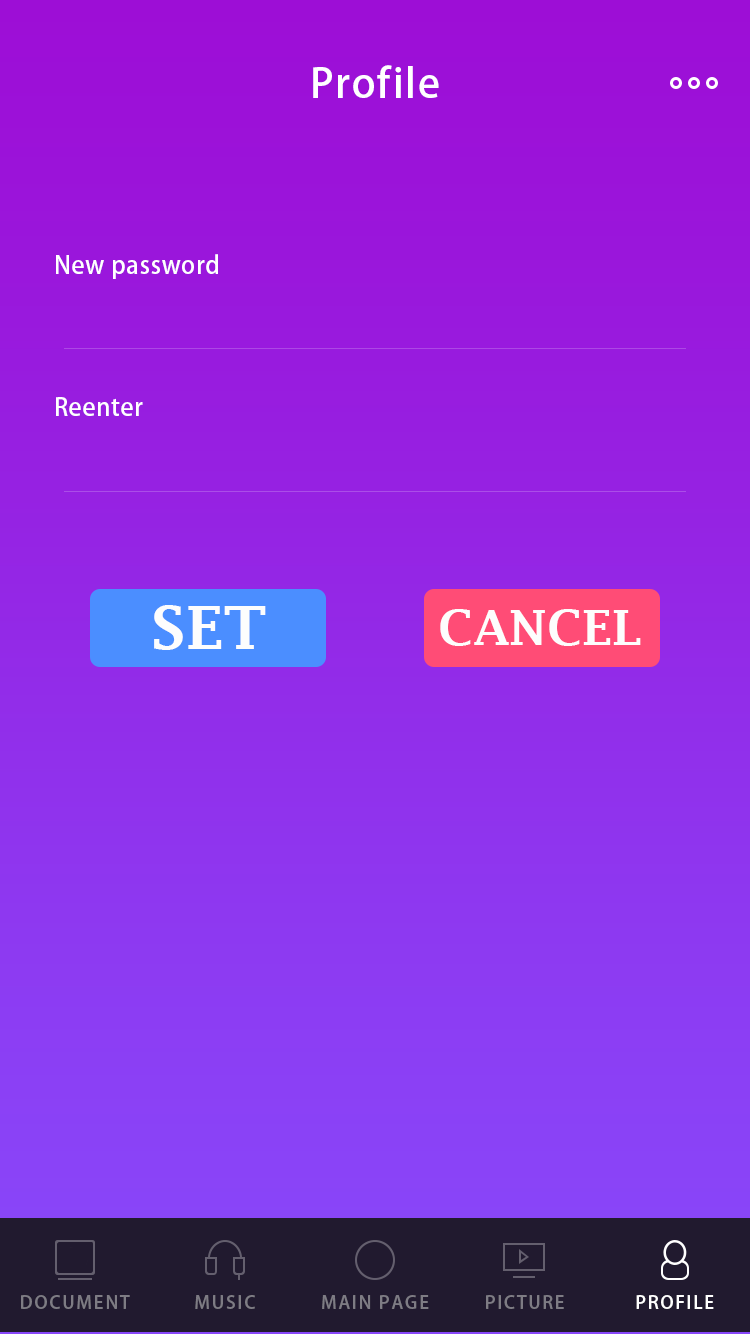
<style>
.page{position:relative;width:750px;height:1334px}
.page>*{position:absolute;margin:0}
.t1{font:40px "AdobeHeitiStd-Regular";letter-spacing:0.05em;color:#ffffff}
.t2{font:24px "MyriadPro-Regular";letter-spacing:0.025em;color:#ffffff}
.t3{font:24px "AdobeHeitiStd-Regular";letter-spacing:0.025em;color:#ffffff}
.t4{font:60px "LucidaFax-Demi";color:#fdfdfd}
.t5{font:48px "LucidaFax-Demi";color:#fdfdfd}
.t6{font:18px "AdobeHeitiStd-Regular";letter-spacing:0.1em;color:#7e7c84;text-transform:uppercase}
.t7{font:18px "AdobeHeitiStd-Regular";letter-spacing:0.1em;color:#ffffff;text-transform:uppercase}
</style>
<div class="page">
<p class="t1" style="left:313px;top:65px;width:126px;height:33px">Profile</p>
<p class="t2" style="left:56px;top:254px;width:162px;height:25px">New password</p>
<p class="t3" style="left:56px;top:397px;width:87px;height:19px">Reenter</p>
<p class="t4" style="left:154px;top:605px;width:112px;height:45px">SET</p>
<p class="t5" style="left:440px;top:609px;width:201px;height:37px">CANCEL</p>
<p class="t6" style="left:21px;top:1295px;width:109px;height:14px">document</p>
<p class="t6" style="left:195px;top:1295px;width:60px;height:14px">music</p>
<p class="t6" style="left:322px;top:1295px;width:107px;height:14px">main page</p>
<p class="t6" style="left:486px;top:1295px;width:78px;height:14px">picture</p>
<p class="t7" style="left:636px;top:1295px;width:78px;height:14px">profile</p>
</div>
